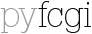
<style>
.page{position:relative;width:92px;height:34px;background:#ffffff}
.page>*{position:absolute;margin:0}
.t1{font:36px "GlyphaLTStd-Thin";color:#0f0f0f}
.t2{font:36px "GlyphaLTStd-Thin";color:#9a9a9a}
</style>
<div class="page">
<p class="t1" style="left:0px;top:1px;width:91px;height:32px"><span class="t2">py</span>fcgi</p>
</div>
